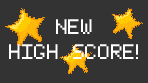
<style>
.page{position:relative;width:148px;height:83px;background:#333333}
.page>*{position:absolute;margin:0}
.t1{font:42.4px/24.4px "ThinPixel-7";color:#ffffff}
</style>
<div class="page">
<p class="t1" style="left:9px;top:19px;width:129px;height:40px;text-align:center">NEW<br>HIGH SCORE!</p>
</div>
